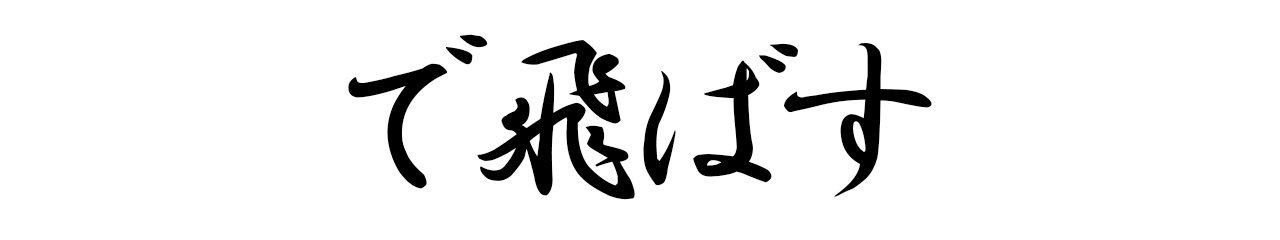
<style>
.page{position:relative;width:1280px;height:240px;background:#ffffff}
.page>*{position:absolute;margin:0}
.t1{font:195.8px "HGSGyoshotai";letter-spacing:-0.22em;color:#000000}
</style>
<div class="page">
<p class="t1" style="left:348px;top:34px;width:584px;height:166px">で飛ばす</p>
</div>
